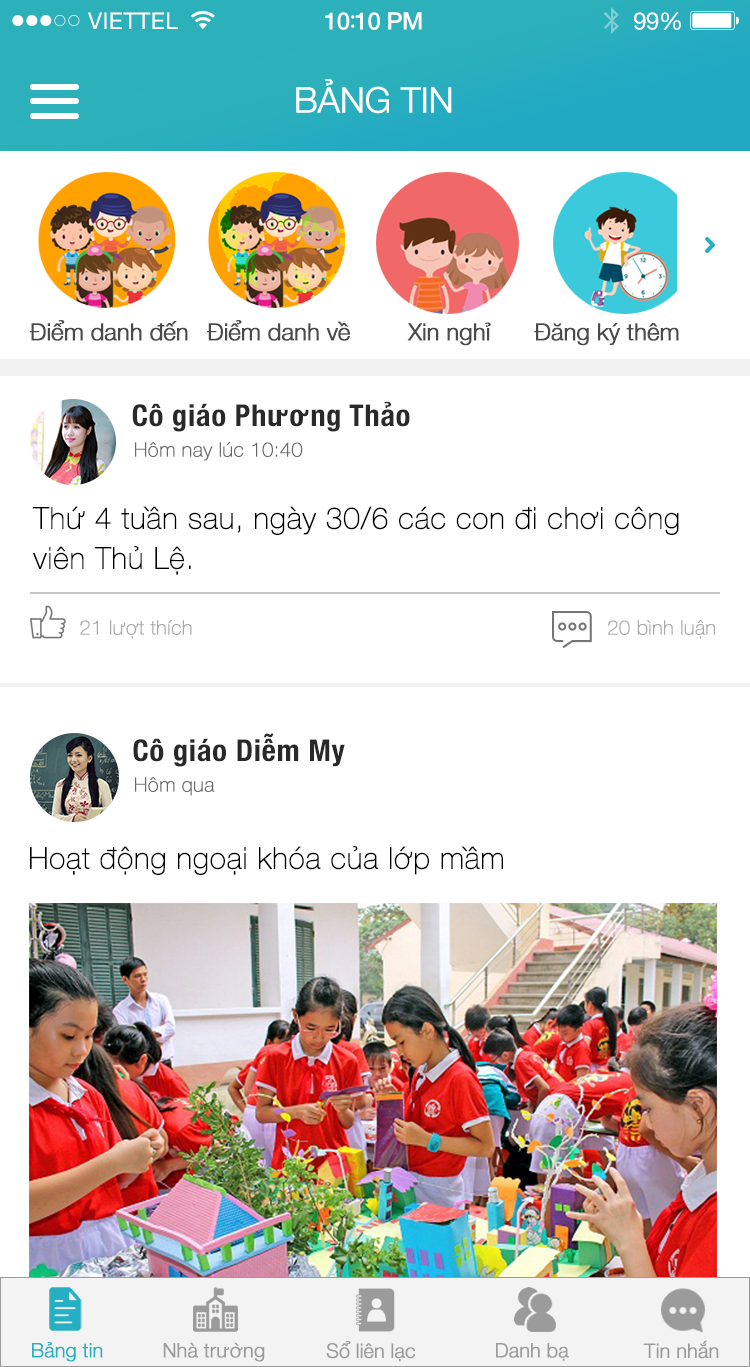
<style>
.page{position:relative;width:750px;height:1367px;background:#ffffff}
.page>*{position:absolute;margin:0}
.t1{font:23px "HelveticaNeue";letter-spacing:0.02em;color:#ffffff}
.t2{font:24px "HelveticaNeue-Medium";letter-spacing:-0.02em;color:#ffffff}
.t3{font:26px "MyriadPro-Regular";letter-spacing:-0.02em;color:#ffffff}
.t4{font:24px "HelveticaNeue";letter-spacing:-0.02em;color:#ffffff}
.t5{font:35px "HelveticaNeue-Light";letter-spacing:-0.02em;color:#ffffff;font-weight:bold}
.t6{font:23.7px "HelveticaNeue-Light";letter-spacing:-0.02em;color:#4a4a4a;font-weight:bold}
.t7{font:30px "HelveticaNeue-CondensedBold";letter-spacing:0.03em;color:#292929}
.t8{font:20px "HelveticaNeue-Thin";color:#6a6a6a;font-weight:bold}
.t9{font:30px/40px "HelveticaNeue-Thin";color:#000000;font-weight:bold}
.t10{font:20px "HelveticaNeue-Thin";color:#aaaaaa;font-weight:bold}
.t11{font:30px "HelveticaNeue-Thin";color:#000000;font-weight:bold}
.t12{font:20px "HelveticaNeue-Light";letter-spacing:-0.02em;color:#26afc2;font-weight:bold}
.t13{font:20px "HelveticaNeue-Light";letter-spacing:-0.02em;color:#9b9b9b;font-weight:bold}
</style>
<div class="page">
<p class="t1" style="left:88px;top:12px;width:90px;height:17px">VIETTEL</p>
<p class="t2" style="left:325px;top:12px;width:97px;height:18px">10<span class="t3">:</span>10 PM</p>
<p class="t4" style="left:634px;top:12px;width:47px;height:18px">99%</p>
<p class="t5" style="left:296px;top:79px;width:156px;height:35px">BẢNG TIN</p>
<p class="t6" style="left:29px;top:320px;width:159px;height:21px">Điểm danh đến</p>
<p class="t6" style="left:207px;top:320px;width:143px;height:21px">Điểm danh về</p>
<p class="t6" style="left:407px;top:322px;width:84px;height:24px">Xin nghỉ</p>
<p class="t6" style="left:534px;top:323px;width:145px;height:23px">Đăng ký thêm</p>
<p class="t7" style="left:132px;top:401px;width:278px;height:31px">Cô giáo Phương Thảo</p>
<p class="t8" style="left:135px;top:442px;width:168px;height:19px">Hôm nay lúc 10:40</p>
<p class="t9" style="left:32px;top:506px;width:647px;height:69px">Thứ 4 tuần sau, ngày 30/6 các con đi chơi công<br>viên Thủ Lệ.</p>
<p class="t10" style="left:80px;top:620px;width:112px;height:19px">21 lượt thích</p>
<p class="t10" style="left:608px;top:620px;width:107px;height:19px">20 bình luận</p>
<p class="t7" style="left:133px;top:733px;width:212px;height:34px">Cô giáo Diễm My</p>
<p class="t8" style="left:135px;top:777px;width:80px;height:19px">Hôm qua</p>
<p class="t11" style="left:30px;top:846px;width:473px;height:29px">Hoạt động ngoại khóa của lớp mầm</p>
<p class="t12" style="left:32px;top:1342px;width:71px;height:20px">Bảng tin</p>
<p class="t13" style="left:163px;top:1342px;width:102px;height:20px">Nhà trường</p>
<p class="t13" style="left:326px;top:1341px;width:90px;height:21px">Sổ liên lạc</p>
<p class="t13" style="left:496px;top:1343px;width:73px;height:18px">Danh bạ</p>
<p class="t13" style="left:643px;top:1340px;width:76px;height:19px">Tin nhắn</p>
</div>
